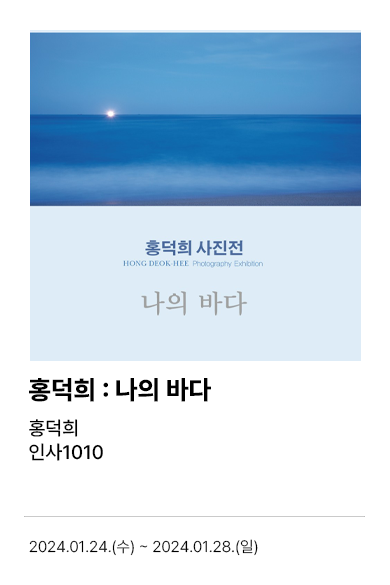
<style>
.page{position:relative;width:390px;height:585px;background:#ffffff}
.page>*{position:absolute;margin:0}
.t1{font:26px "PretendardVariable-ExtraBold";color:#000000}
.t2{font:19.5px "PretendardVariable-Medium";color:#000000}
.t3{font:15.5px "PretendardVariable-Light";color:#000000}
</style>
<div class="page">
<p class="t1" style="left:29px;top:378px;width:182px;height:24px">홍덕희 : 나의 바다</p>
<p class="t2" style="left:29px;top:419px;width:49px;height:18px">홍덕희</p>
<p class="t2" style="left:29px;top:443px;width:74px;height:18px">인사1010</p>
<p class="t3" style="left:29px;top:539px;width:229px;height:17px">2024.01.24.(수) ~ 2024.01.28.(일)</p>
</div>
